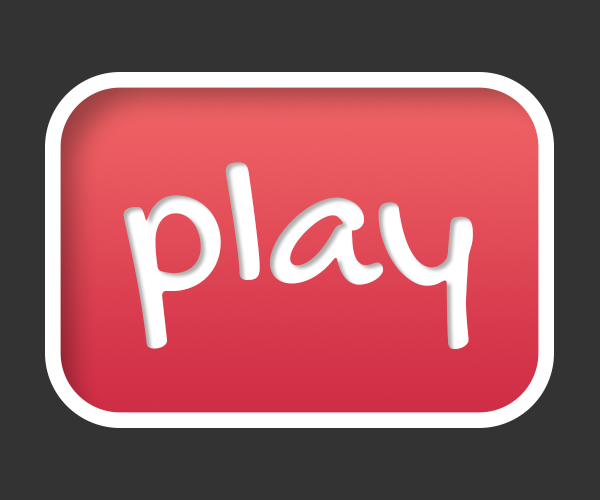
<style>
.page{position:relative;width:600px;height:500px;background:#333333}
.page>*{position:absolute;margin:0}
.t1{font:200px "GochiHand-Regular";color:#ffffff}
</style>
<div class="page">
<p class="t1" style="left:123px;top:162px;width:350px;height:188px">play</p>
</div>
